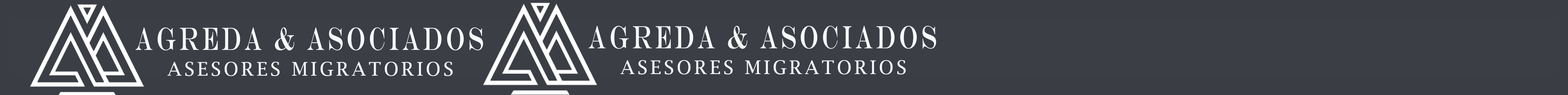
<style>
.page{position:relative;width:1568px;height:95px;background:#3a3d44}
.page>*{position:absolute;margin:0}
.t1{font:32.2px "EngraversMT";letter-spacing:0.15em;color:#f7f9fb;scale:0.62 1}
.t2{font:18.8px "LucidaBright";letter-spacing:0.15em;color:#f7f9fb}
</style>
<div class="page">
<p class="t1" style="left:136px;top:27px;width:347px;height:24px">AGREDA &amp; ASOCIADOS</p>
<p class="t1" style="left:589px;top:26px;width:347px;height:23px">AGREDA &amp; ASOCIADOS</p>
<p class="t2" style="left:167px;top:62px;width:286px;height:14px">ASESORES MIGRATORIOS</p>
<p class="t2" style="left:620px;top:60px;width:286px;height:15px">ASESORES MIGRATORIOS</p>
</div>
